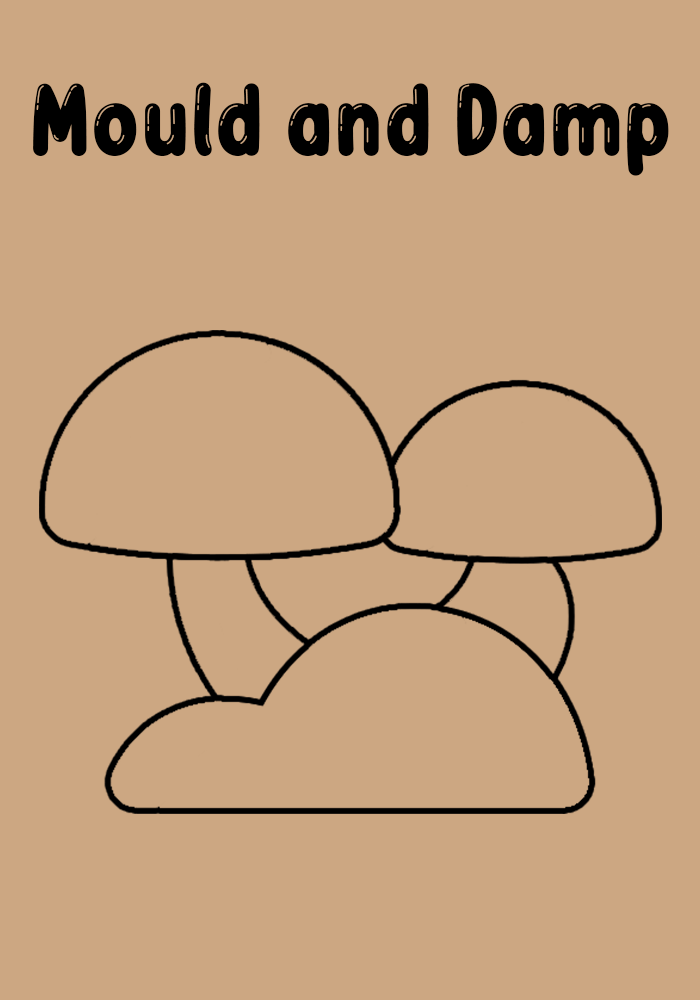
<style>
.page{position:relative;width:700px;height:1000px;background:#cca782}
.page>*{position:absolute;margin:0}
.t1{font:104.2px "BubbleBobble";color:#000000}
</style>
<div class="page">
<p class="t1" style="left:33px;top:82px;width:636px;height:94px">Mould and Damp</p>
</div>
